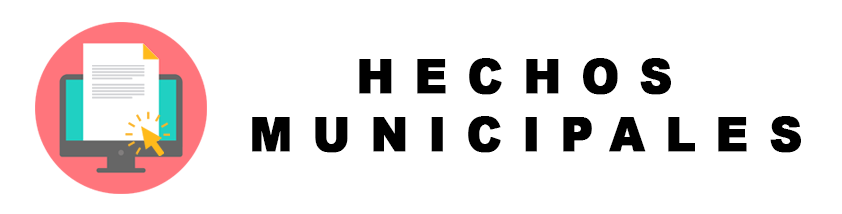
<style>
.page{position:relative;width:842px;height:214px;background:#ffffff}
.page>*{position:absolute;margin:0}
.t1{font:48px "Arial-Black";letter-spacing:0.44em;color:#000000;font-weight:bold;scale:0.93 1}
</style>
<div class="page">
<p class="t1" style="left:252px;top:58px;width:549px;height:95px">HECHOS <br>MUNICIPALES</p>
</div>
